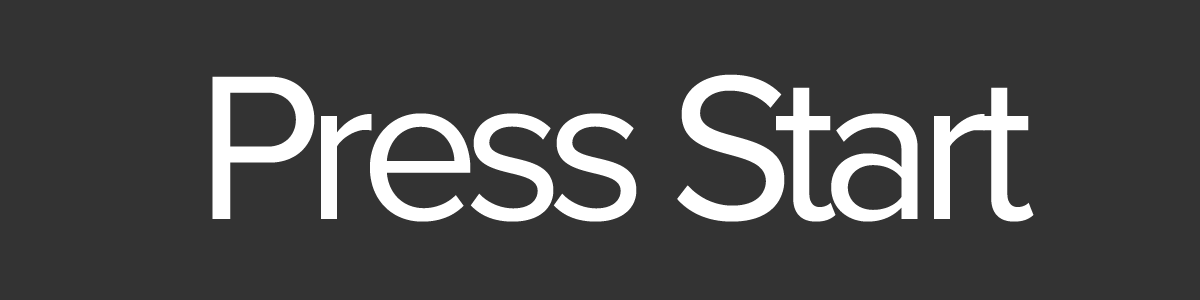
<style>
.page{position:relative;width:1200px;height:300px;background:#333333}
.page>*{position:absolute;margin:0}
.t1{font:213.3px "ProximaNova-Regular";letter-spacing:-0.075em;color:#ffffff}
</style>
<div class="page">
<p class="t1" style="left:212px;top:74px;width:822px;height:148px">Press Start</p>
</div>
